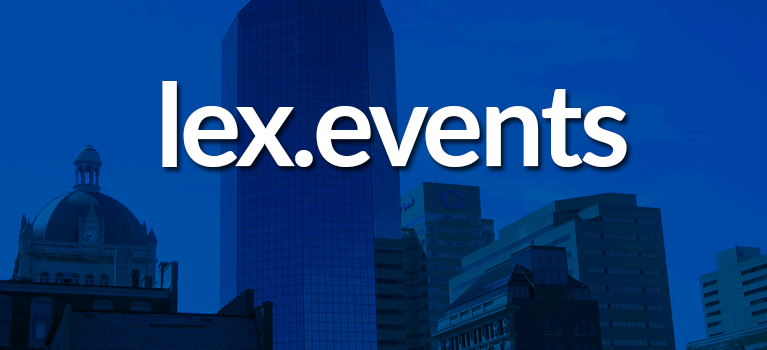
<style>
.page{position:relative;width:767px;height:350px;background:#0049a5}
.page>*{position:absolute;margin:0}
.t1{font:115px "Lato-Bold";letter-spacing:-0.04em;color:#ffffff}
</style>
<div class="page">
<p class="t1" style="left:162px;top:81px;width:465px;height:86px">lex.events</p>
</div>
